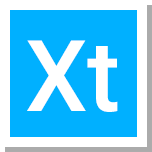
<style>
.page{position:relative;width:152px;height:152px;background:#00b0ff}
.page>*{position:absolute;margin:0}
.t1{font:99px "Roboto-Medium";color:#ffffff}
</style>
<div class="page">
<p class="t1" style="left:27px;top:40px;width:91px;height:72px">Xt</p>
</div>
